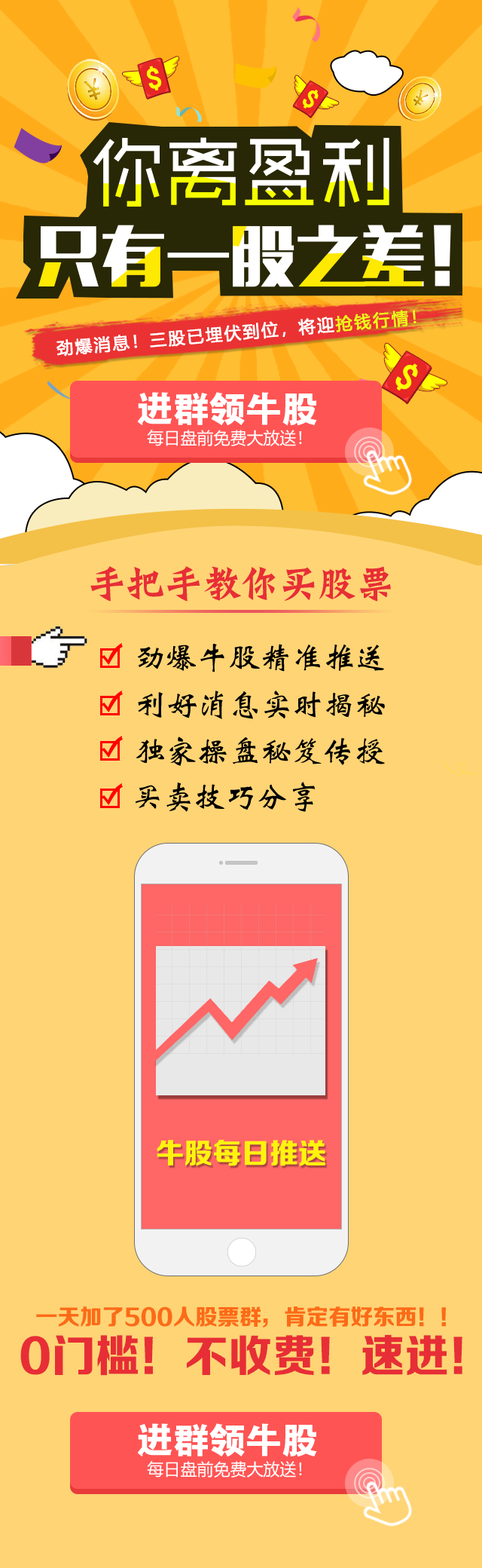
<style>
.page{position:relative;width:482px;height:1568px;background:#ffd475}
.page>*{position:absolute;margin:0}
.t1{font:27px "FZMHJW--GB1-0";letter-spacing:0.075em;color:#ffff00;font-weight:bold}
.t2{font:23.5px "FZMHJW--GB1-0";letter-spacing:0.075em;color:#ffff00;font-weight:bold}
.t3{font:76.7px "RTWSShangGoG0v1-Regular";color:#ffffff}
.t4{font:16.6px "MicrosoftYaHei";letter-spacing:0.1em;color:#ffffff;font-weight:bold}
.t5{font:16.6px "MicrosoftYaHei";letter-spacing:0.1em;color:#ecff17;font-weight:bold}
.t6{font:33.7px "FZMHJW--GB1-0";letter-spacing:0.075em;color:#ffff00;font-weight:bold}
.t7{font:36.2px "TTCHJT--GB1-0";color:#ffffff}
.t8{font:16.6px "MicrosoftYaHei";color:#ffffff}
.t9{font:38.3px "JSuHun1";color:#e72e36}
.t10{font:31.5px "JWeiBei";color:#000000}
.t11{font:28.6px "FZZDHJW--GB1-0";color:#ffff00}
.t12{font:22.2px "FZZDHJW--GB1-0";color:#fc6b17}
.t13{font:44.2px "FZZDHJW--GB1-0";color:#e72e36}
</style>
<div class="page">
<p class="t1" style="left:147px;top:66px;width:15px;height:24px;rotate:-15deg">$</p>
<p class="t2" style="left:303px;top:90px;width:16px;height:19px;rotate:35deg">$</p>
<p class="t3" style="left:93px;top:137px;width:297px;height:70px">你离盈利</p>
<p class="t4" style="left:57px;top:310px;width:360px;height:47px;rotate:-5deg">劲爆消息！三股已埋伏到位，将迎<span class="t5">抢钱行情！</span></p>
<p class="t6" style="left:396px;top:363px;width:22px;height:27px;rotate:35deg">$</p>
<p class="t7" style="left:137px;top:392px;width:180px;height:34px">进群领牛股</p>
<p class="t8" style="left:147px;top:430px;width:155px;height:16px">每日盘前免费大放送！</p>
<p class="t9" style="left:90px;top:566px;width:301px;height:36px">手把手教你买股票</p>
<p class="t10" style="left:138px;top:644px;width:246px;height:28px">劲爆牛股精准推送</p>
<p class="t10" style="left:138px;top:691px;width:247px;height:28px">利好消息实时揭秘</p>
<p class="t10" style="left:136px;top:737px;width:249px;height:29px">独家操盘秘笈传授</p>
<p class="t10" style="left:136px;top:782px;width:180px;height:30px">买卖技巧分享</p>
<p class="t11" style="left:157px;top:1140px;width:169px;height:26px;opacity:0.9">牛股每日推送</p>
<p class="t12" style="left:36px;top:1306px;width:410px;height:22px">一天加了500人股票群，肯定有好东西！！</p>
<p class="t13" style="left:20px;top:1334px;width:443px;height:42px">0门槛！不收费！速进！</p>
<p class="t7" style="left:137px;top:1423px;width:180px;height:34px">进群领牛股</p>
<p class="t8" style="left:147px;top:1461px;width:155px;height:17px">每日盘前免费大放送！</p>
</div>
